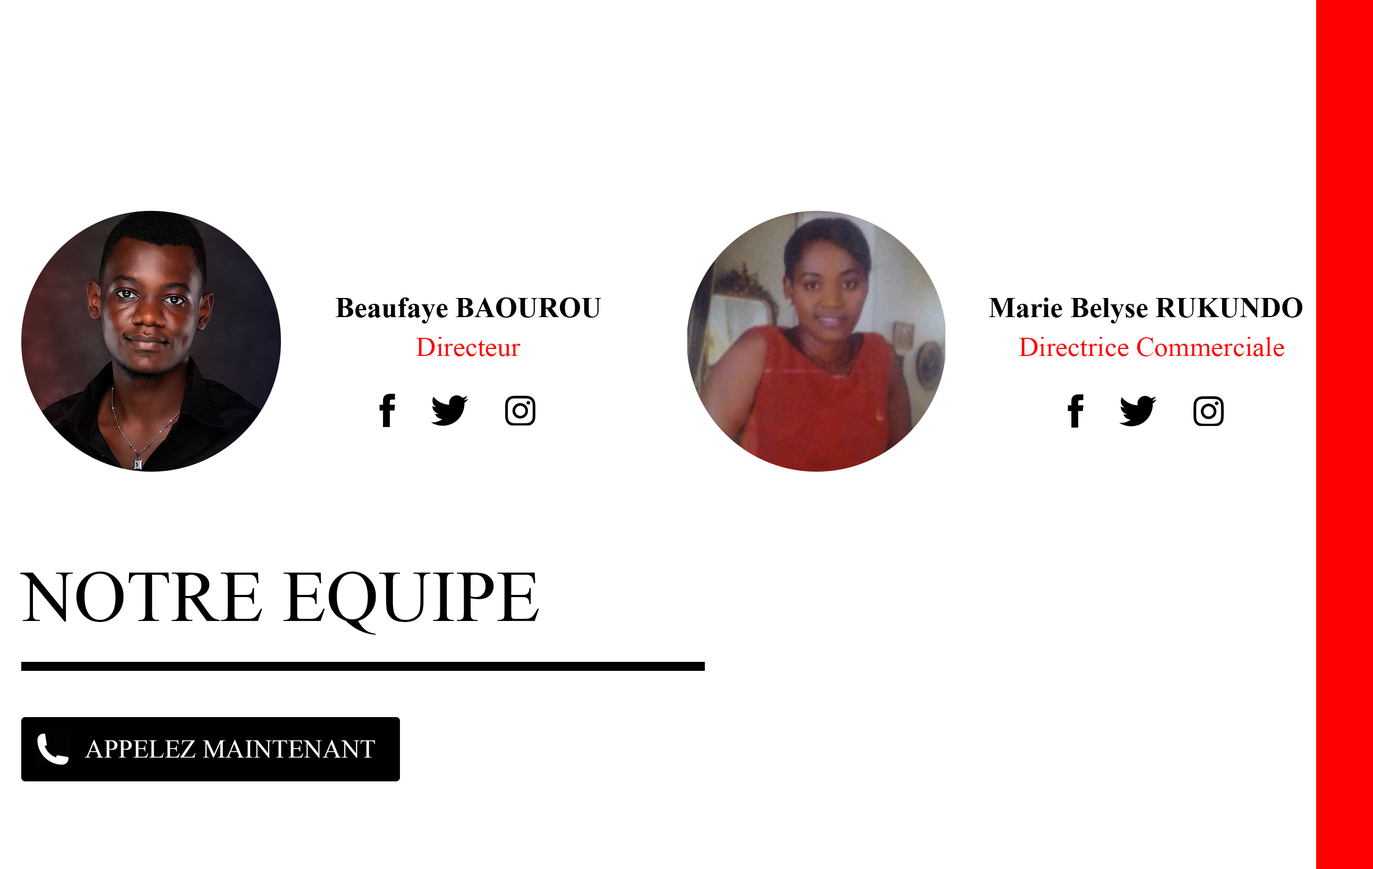
<style>
.page{position:relative;width:1373px;height:869px;background:#ffffff}
.page>*{position:absolute;margin:0}
.t1{font:28.7px "TimesNewRomanPS-BoldMT";color:#000000}
.t2{font:27.6px "TimesNewRomanPSMT";color:#ff0101}
.t3{font:72.7px "TimesNewRomanPSMT";color:#000000}
</style>
<div class="page">
<p class="t1" style="left:989px;top:297px;width:313px;height:26px">Marie Belyse RUKUNDO</p>
<p class="t2" style="left:416px;top:337px;width:104px;height:19px">Directeur</p>
<p class="t2" style="left:1018px;top:337px;width:266px;height:19px">Directrice Commerciale</p>
<p class="t3" style="left:20px;top:571px;width:519px;height:64px">NOTRE EQUIPE</p>
</div>
